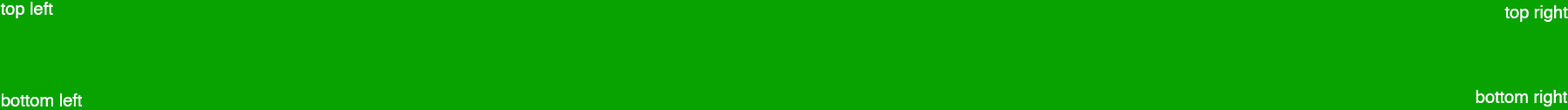
<style>
.page{position:relative;width:1568px;height:110px;background:#08a300}
.page>*{position:absolute;margin:0}
.t1{font:17.4px "Helvetica";color:#ffffff}
</style>
<div class="page">
<p class="t1" style="left:0px;top:2px;width:53px;height:16px">top left</p>
<p class="t1" style="left:1504px;top:5px;width:64px;height:17px">top right</p>
<p class="t1" style="left:1476px;top:90px;width:91px;height:16px">bottom right</p>
<p class="t1" style="left:2px;top:93px;width:80px;height:13px">bottom left</p>
</div>
